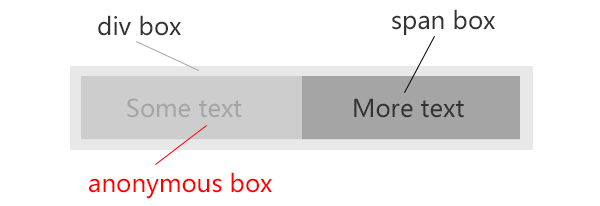
<style>
.page{position:relative;width:600px;height:206px;background:#ffffff}
.page>*{position:absolute;margin:0}
.t1{font:12px/36px "MicrosoftYaHei";color:#333333}
.t2{font:12px "MicrosoftYaHei";color:#a5a5a5}
.t3{font:12px "MicrosoftYaHei";color:#333333}
.t4{font:12px/36px "MicrosoftYaHei";color:#ff0000}
</style>
<div class="page">
<p class="t1" style="left:98px;top:15px;width:83px;height:21px">div box</p>
<p class="t1" style="left:392px;top:9px;width:103px;height:26px">span box</p>
<p class="t2" style="left:127px;top:98px;width:115px;height:20px">Some text</p>
<p class="t3" style="left:354px;top:98px;width:110px;height:20px">More text</p>
<p class="t4" style="left:89px;top:172px;width:183px;height:27px">anonymous box</p>
</div>
